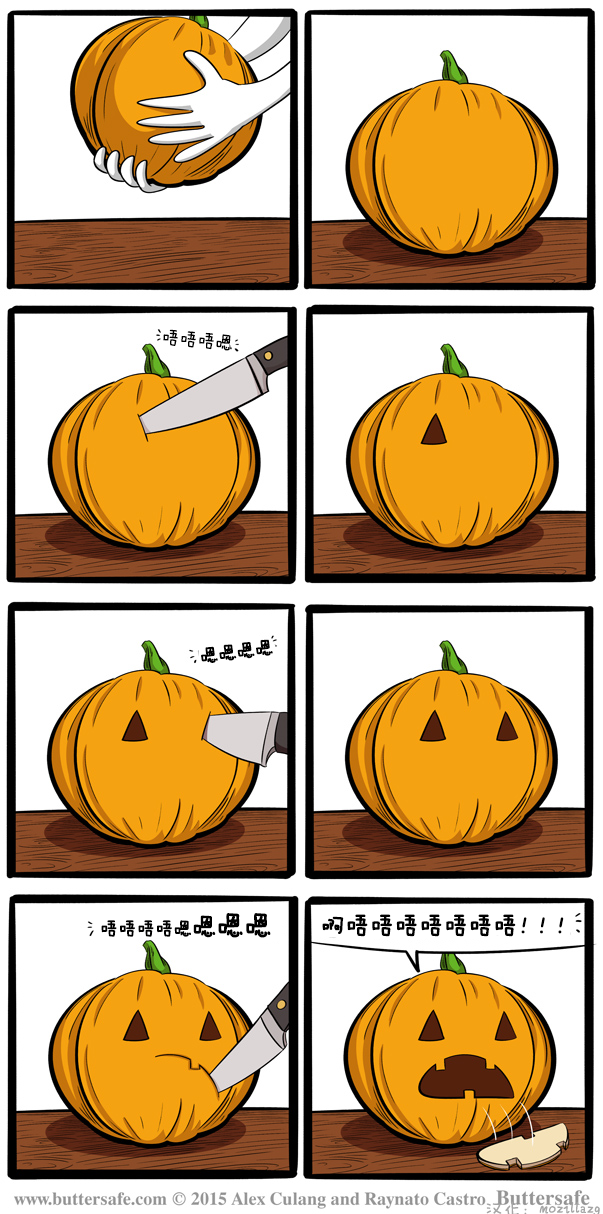
<style>
.page{position:relative;width:603px;height:1214px;background:#ffffff}
.page>*{position:absolute;margin:0}
.t1{font:18px "FZMWJW--GB1-0";color:#000000}
.t2{font:18px "FZMWJW--GB1-0";color:#000000;font-weight:bold}
.t3{font:24px "FZMWJW--GB1-0";color:#000000;font-weight:bold}
.t4{font:27px "FZMWJW--GB1-0";color:#000000;font-weight:bold}
.t5{font:24px "FZMWJW--GB1-0";letter-spacing:-0.26em;color:#000000;font-weight:bold}
.t6{font:18px "FZMWJW--GB1-0";color:#a5a5a5}
</style>
<div class="page">
<p class="t1" style="left:163px;top:329px;width:69px;height:22px;rotate:5deg">唔唔唔嗯</p>
<p class="t2" style="left:201px;top:639px;width:72px;height:24px;rotate:-7deg">嗯嗯嗯嗯</p>
<p class="t2" style="left:101px;top:913px;width:170px;height:25px">唔唔唔唔嗯<span class="t3">嗯</span><span class="t4">嗯嗯</span></p>
<p class="t3" style="left:322px;top:914px;width:242px;height:23px"><span class="t2">  </span>啊唔唔唔唔唔唔唔<span class="t5">！！！</span></p>
<p class="t6" style="left:486px;top:1201px;width:114px;height:15px">汉化：mozillazg</p>
</div>
